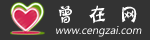
<style>
.page{position:relative;width:150px;height:40px;background:#333333}
.page>*{position:absolute;margin:0}
.t1{font:20px "HYn3gj";letter-spacing:0.6em;color:#ffffff}
.t2{font:11px "SegoeWP";color:#ffffff;font-style:italic}
</style>
<div class="page">
<p class="t1" style="left:58px;top:5px;width:79px;height:19px">曾在网</p>
<p class="t2" style="left:56px;top:26px;width:86px;height:11px">www.cengzai.com</p>
</div>
